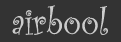
<style>
.page{position:relative;width:121px;height:42px;background:#333333}
.page>*{position:absolute;margin:0}
.t1{font:37.5px "CurlzMT";color:#cccccc}
</style>
<div class="page">
<p class="t1" style="left:12px;top:5px;width:96px;height:30px">airbool</p>
</div>
